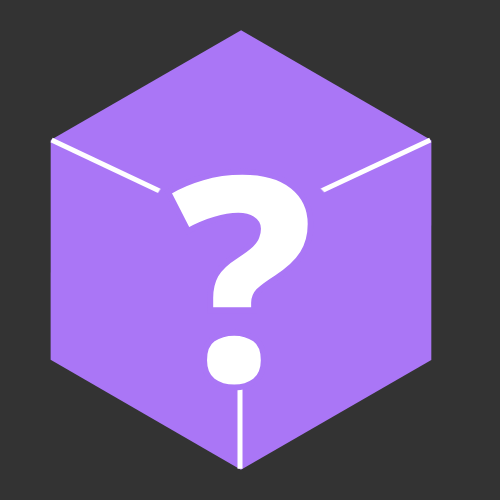
<style>
.page{position:relative;width:500px;height:500px;background:#333333}
.page>*{position:absolute;margin:0}
.t1{font:293px "NotoSans-Black";color:#ffffff}
</style>
<div class="page">
<p class="t1" style="left:161px;top:164px;width:157px;height:231px">?</p>
</div>
